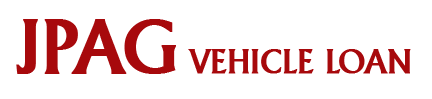
<style>
.page{position:relative;width:432px;height:99px;background:#ffffff}
.page>*{position:absolute;margin:0}
.t1{font:33.3px "Adelon-Medium";color:#a7090c;font-weight:bold}
.t2{font:75px "Adelon-Medium";color:#a7090c;font-weight:bold}
</style>
<div class="page">
<p class="t1" style="left:16px;top:19px;width:395px;height:55px"><span class="t2">JPAG </span>VEHICLE LOAN</p>
</div>
